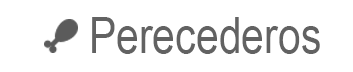
<style>
.page{position:relative;width:353px;height:72px;background:#ffffff}
.page>*{position:absolute;margin:0}
.t1{font:50px "ArialNarrow";color:#626262}
</style>
<div class="page">
<p class="t1" style="left:92px;top:17px;width:228px;height:37px">Perecederos</p>
</div>
